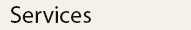
<style>
.page{position:relative;width:191px;height:30px;background:#f3f1e9}
.page>*{position:absolute;margin:0}
.t1{font:24px "MyriadPro-Regular";color:#111111}
</style>
<div class="page">
<p class="t1" style="left:10px;top:6px;width:81px;height:17px">Services</p>
</div>
